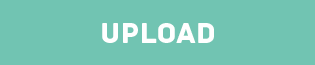
<style>
.page{position:relative;width:315px;height:65px;background:#71c4b2}
.page>*{position:absolute;margin:0}
.t1{font:30px "Archive";color:#ffffff}
</style>
<div class="page">
<p class="t1" style="left:102px;top:23px;width:112px;height:20px">Upload</p>
</div>
